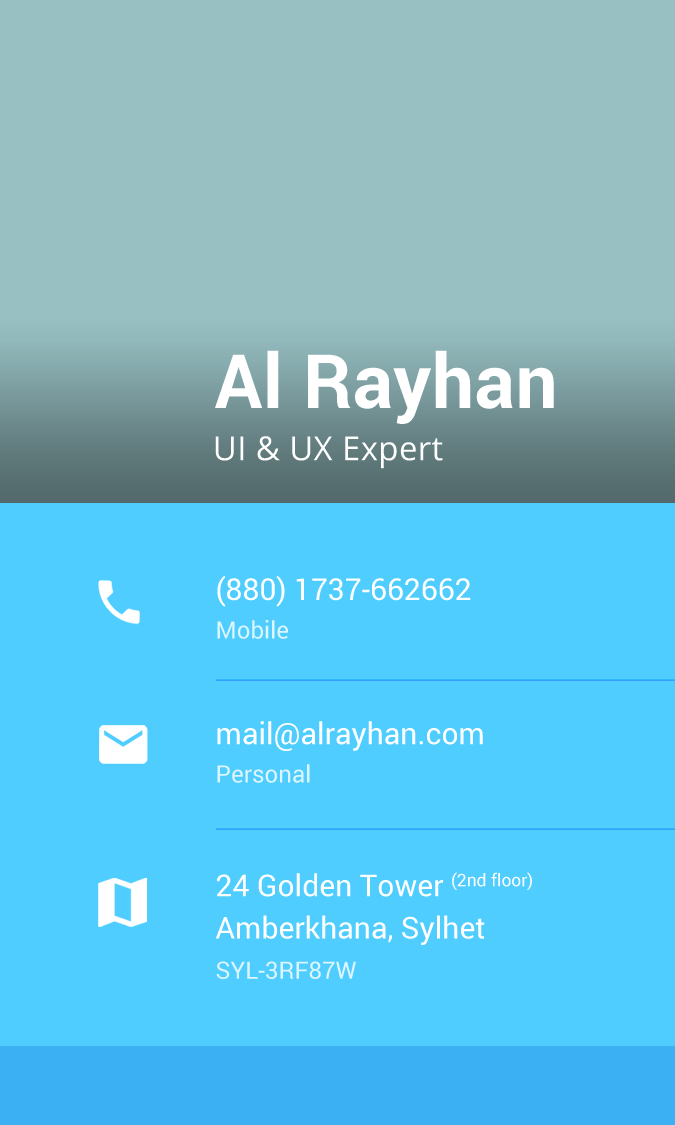
<style>
.page{position:relative;width:675px;height:1125px;background:#4fcdff}
.page>*{position:absolute;margin:0}
.t1{font:75px "Roboto-Bold";letter-spacing:0.01em;color:#ffffff}
.t2{font:33.3px "OpenSans";letter-spacing:0.01em;color:#ffffff}
.t3{font:30.1px "Roboto-Regular";color:#ffffff}
.t4{font:24.1px "Roboto-Regular";color:#dcf5ff}
.t5{font:30.1px/42.2px "Roboto-Regular";color:#ffffff}
</style>
<div class="page">
<p class="t1" style="left:215px;top:350px;width:339px;height:74px">Al Rayhan</p>
<p class="t2" style="left:215px;top:436px;width:228px;height:33px">UI &amp; UX Expert</p>
<p class="t3" style="left:217px;top:575px;width:254px;height:32px">(880) 1737-662662</p>
<p class="t4" style="left:217px;top:620px;width:71px;height:19px">Mobile</p>
<p class="t3" style="left:217px;top:721px;width:266px;height:30px">mail@alrayhan.com</p>
<p class="t4" style="left:217px;top:764px;width:93px;height:19px">Personal</p>
<p class="t5" style="left:215px;top:872px;width:317px;height:73px">24 Golden Tower (2nd floor) <br>Amberkhana, Sylhet</p>
<p class="t4" style="left:216px;top:961px;width:140px;height:18px">SYL-3RF87W</p>
</div>
